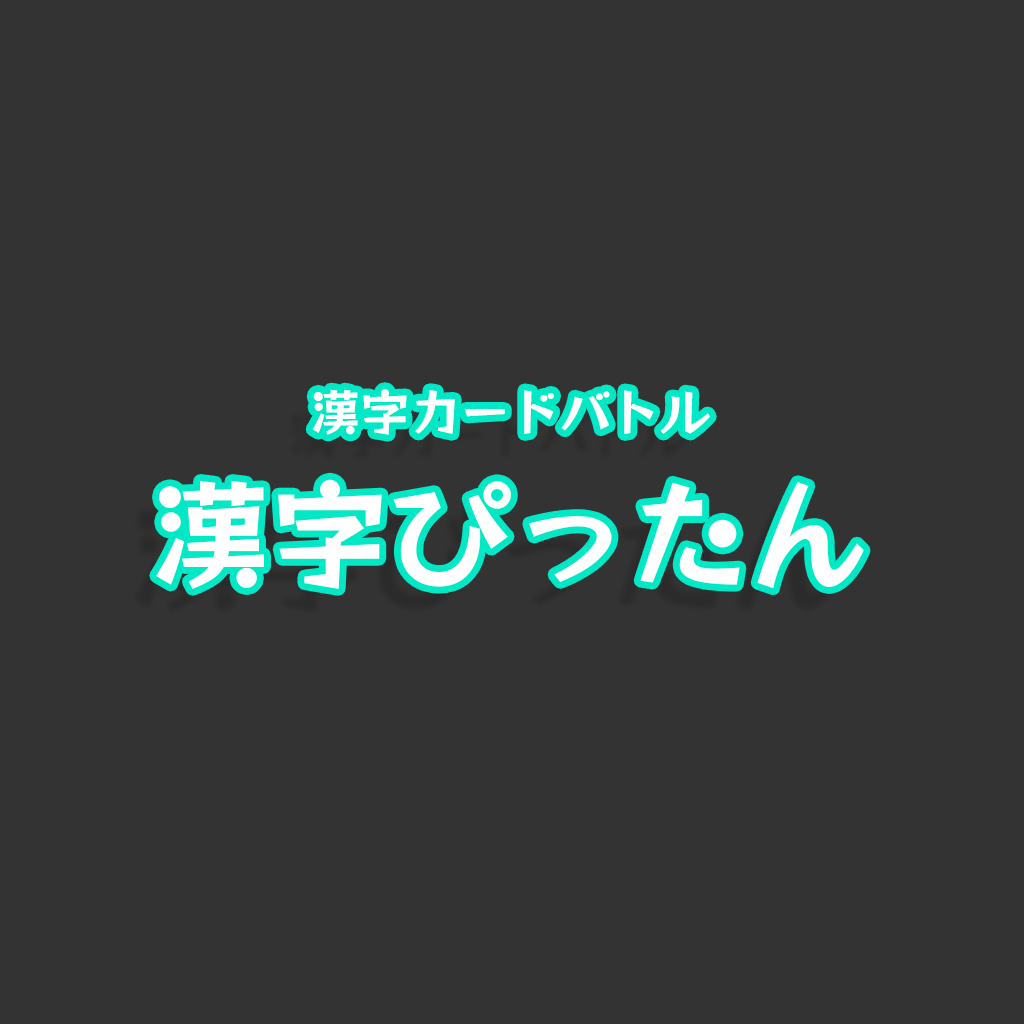
<style>
.page{position:relative;width:1024px;height:1024px;background:#333333}
.page>*{position:absolute;margin:0}
.t1{font:50px "RocknRollOne-Regular";color:#ffffff}
.t2{font:120px "RocknRollOne-Regular";color:#ffffff}
</style>
<div class="page">
<p class="t1" style="left:156px;top:389px;width:708px;height:200px;text-align:center">漢字カードバトル<br><span class="t2">漢字ぴったん</span></p>
</div>
